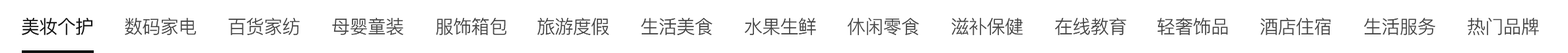
<style>
.page{position:relative;width:1568px;height:53px;background:#ffffff}
.page>*{position:absolute;margin:0}
.t1{font:18.5px "PingFang-SC-Medium";letter-spacing:-0.024em;color:#121212}
.t2{font:18.5px "PingFang-SC-Regular";letter-spacing:-0.024em;color:#434343}
</style>
<div class="page">
<p class="t1" style="left:22px;top:18px;width:70px;height:17px">美妆个护</p>
<p class="t2" style="left:125px;top:18px;width:71px;height:17px">数码家电</p>
<p class="t2" style="left:228px;top:18px;width:72px;height:17px">百货家纺</p>
<p class="t2" style="left:332px;top:18px;width:71px;height:17px">母婴童装</p>
<p class="t2" style="left:436px;top:17px;width:70px;height:18px">服饰箱包</p>
<p class="t2" style="left:537px;top:18px;width:72px;height:17px">旅游度假</p>
<p class="t2" style="left:641px;top:18px;width:71px;height:17px">生活美食</p>
<p class="t2" style="left:745px;top:18px;width:71px;height:17px">水果生鲜</p>
<p class="t2" style="left:848px;top:18px;width:71px;height:17px">休闲零食</p>
<p class="t2" style="left:951px;top:18px;width:72px;height:17px">滋补保健</p>
<p class="t2" style="left:1055px;top:18px;width:71px;height:17px">在线教育</p>
<p class="t2" style="left:1157px;top:17px;width:71px;height:18px">轻奢饰品</p>
<p class="t2" style="left:1260px;top:18px;width:71px;height:17px">酒店住宿</p>
<p class="t2" style="left:1364px;top:18px;width:71px;height:17px">生活服务</p>
<p class="t2" style="left:1468px;top:18px;width:71px;height:17px">热门品牌</p>
</div>
